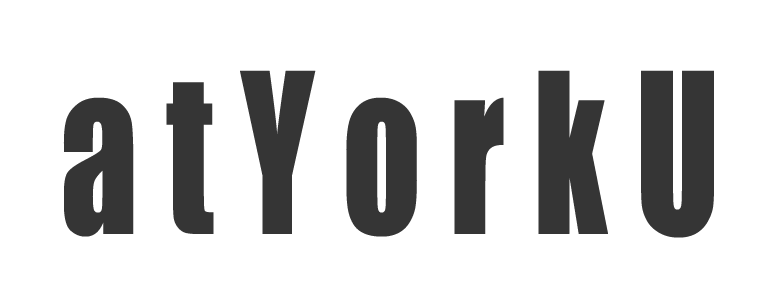
<style>
.page{position:relative;width:772px;height:300px;background:#ffffff}
.page>*{position:absolute;margin:0}
.t1{font:206.4px "Impact";letter-spacing:0.178em;color:#353535;scale:0.75 1}
</style>
<div class="page">
<p class="t1" style="left:63px;top:70px;width:651px;height:168px">atYorkU</p>
</div>
